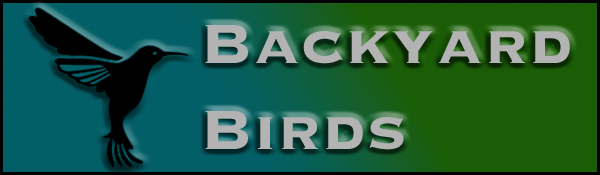
<style>
.page{position:relative;width:600px;height:175px;background:#1a5d06}
.page>*{position:absolute;margin:0}
.t1{font:72px "Copperplate-Bold";letter-spacing:0.01em;color:#b3b3b3}
</style>
<div class="page">
<p class="t1" style="left:205px;top:25px;width:365px;height:125px">Backyard <br>Birds</p>
</div>
